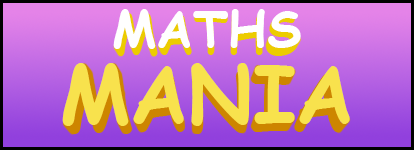
<style>
.page{position:relative;width:414px;height:150px}
.page>*{position:absolute;margin:0}
.t1{font:50.3px "ComicSansMS-Bold";color:#ffffff}
.t2{font:79.2px "ComicSansMS-Bold";color:#f8e24d}
</style>
<div class="page">
<p class="t1" style="left:113px;top:9px;width:188px;height:40px">MATHS</p>
<p class="t2" style="left:62px;top:63px;width:288px;height:63px">MANIA</p>
</div>
